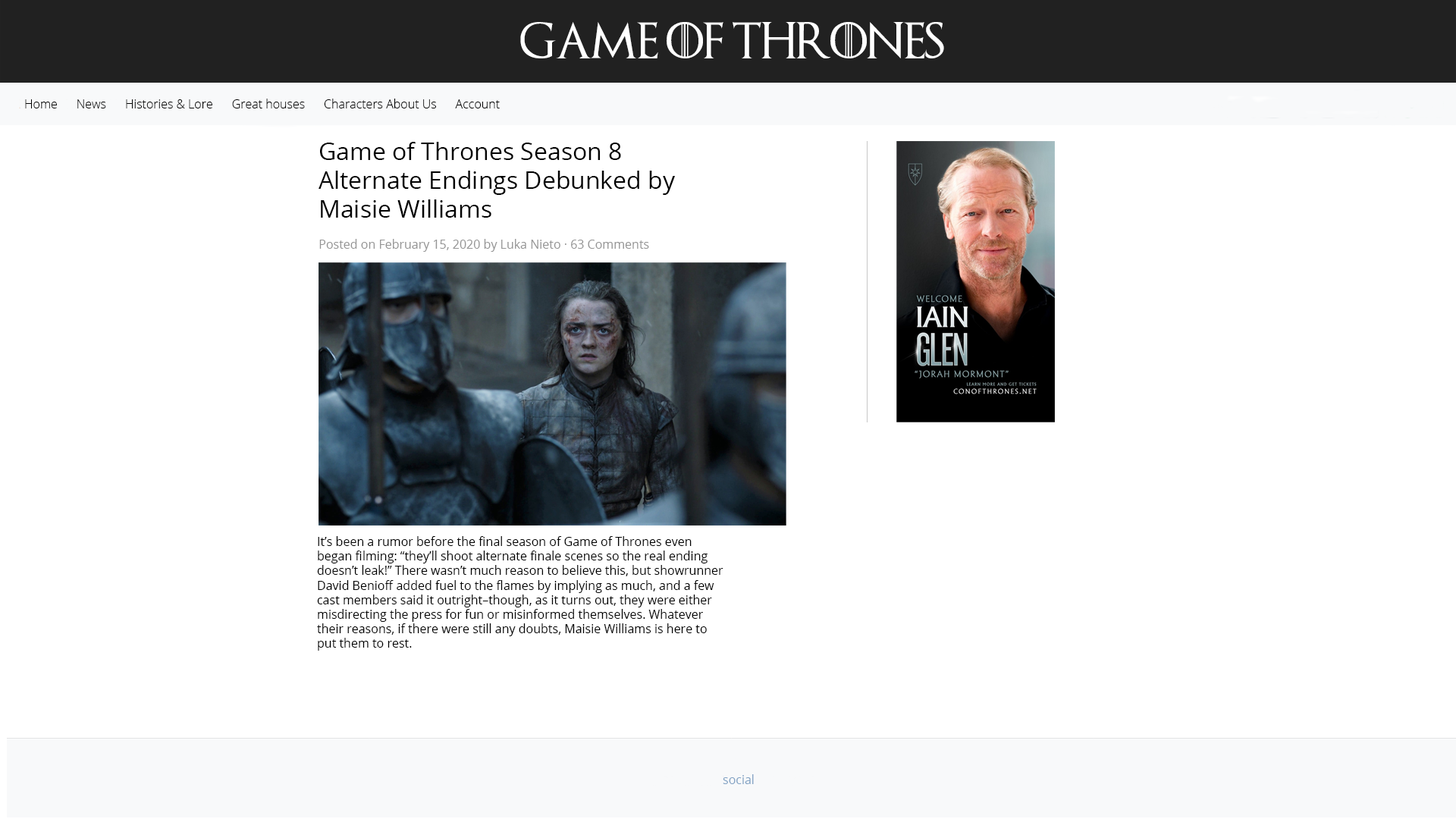
<style>
.page{position:relative;width:1456px;height:819px;background:#ffffff}
.page>*{position:absolute;margin:0}
.t1{font:36.4px "GameofThrones";color:#ffffff}
.t2{font:12.1px "OpenSans-Light";color:#000000}
.t3{font:24.3px "OpenSans-Regular";color:#000000}
.t4{font:12.1px "OpenSans-Regular";color:#959595}
.t5{font:12.1px "OpenSans-Regular";color:#000000}
.t6{font:12.1px "OpenSans-Regular";color:#83a3c4}
</style>
<div class="page">
<p class="t1" style="left:520px;top:22px;width:424px;height:36px">Game of Thrones</p>
<p class="t2" style="left:25px;top:99px;width:475px;height:9px">Home      News      Histories &amp; Lore      Great houses      Сharacters About Us      Account</p>
<p class="t3" style="left:318px;top:142px;width:357px;height:76px">Game of Thrones Season 8 <br>Alternate Endings Debunked by <br>Maisie Williams</p>
<p class="t4" style="left:319px;top:239px;width:330px;height:13px">Posted on February 15, 2020 by Luka Nieto · 63 Comments</p>
<p class="t5" style="left:317px;top:536px;width:406px;height:115px">It’s been a rumor before the final season of Game of Thrones even <br>began filming: “they’ll shoot alternate finale scenes so the real ending <br>doesn’t leak!” There wasn’t much reason to believe this, but showrunner <br>David Benioff added fuel to the flames by implying as much, and a few <br>cast members said it outright–though, as it turns out, they were either <br>misdirecting the press for fun or misinformed themselves. Whatever <br>their reasons, if there were still any doubts, Maisie Williams is here to <br>put them to rest.</p>
<p class="t6" style="left:723px;top:774px;width:31px;height:10px">social</p>
</div>
